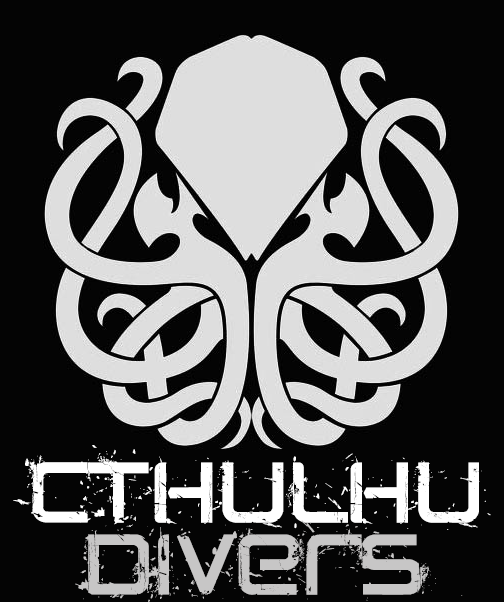
<style>
.page{position:relative;width:504px;height:602px;background:#040404}
.page>*{position:absolute;margin:0}
.t1{font:60px "CRUSHED";color:#ffffff}
.t2{font:60px "CRUSHED";color:#c7c6c6}
</style>
<div class="page">
<p class="t1" style="left:13px;top:445px;width:478px;height:86px">Cthulhu</p>
<p class="t2" style="left:75px;top:520px;width:388px;height:82px">divers</p>
</div>
